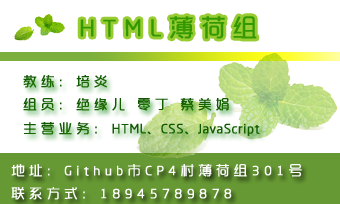
<style>
.page{position:relative;width:340px;height:204px;background:#ffffff}
.page>*{position:absolute;margin:0}
.t1{font:24px "MFYueHei_Noncommercial-Regular";letter-spacing:0.3em;color:#339900;font-weight:bold}
.t2{font:13.3px "MFYueHei_Noncommercial-Regular";letter-spacing:0.3em;color:#135f00;font-weight:bold}
.t3{font:13.3px "MFYueHei_Noncommercial-Regular";letter-spacing:0.02em;color:#135f00;font-weight:bold}
.t4{font:13.3px "MFYueHei_Noncommercial-Regular";letter-spacing:0.3em;color:#ffffff;font-weight:bold}
</style>
<div class="page">
<p class="t1" style="left:80px;top:16px;width:177px;height:23px">HTML薄荷组</p>
<p class="t2" style="left:23px;top:75px;width:237px;height:61px">教练：培炎<br>组员：绝缘儿 零丁 蔡美娟<br>主营业务：<span class="t3">HTML、CSS、JavaScript</span></p>
<p class="t4" style="left:11px;top:164px;width:291px;height:36px">地址：Github市CP4村薄荷组301号<br>联系方式：18945789878</p>
</div>
